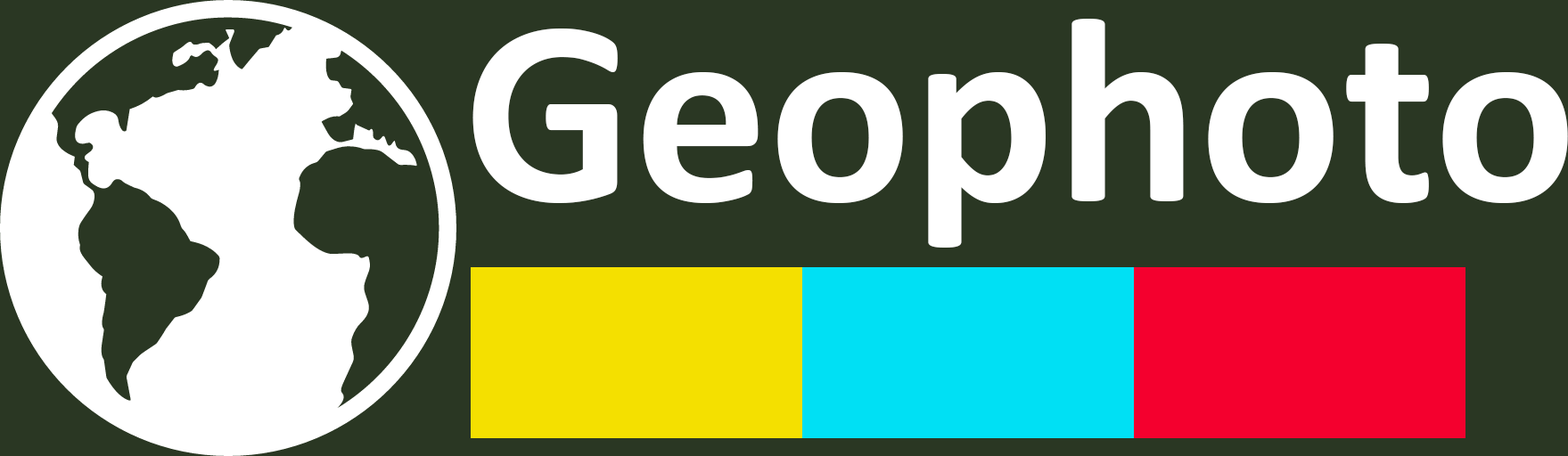
<style>
.page{position:relative;width:1568px;height:456px;background:#2a3723}
.page>*{position:absolute;margin:0}
.t1{font:267.4px "Calibri-Bold";color:#ffffff}
</style>
<div class="page">
<p class="t1" style="left:472px;top:19px;width:1096px;height:229px">Geophoto</p>
</div>
